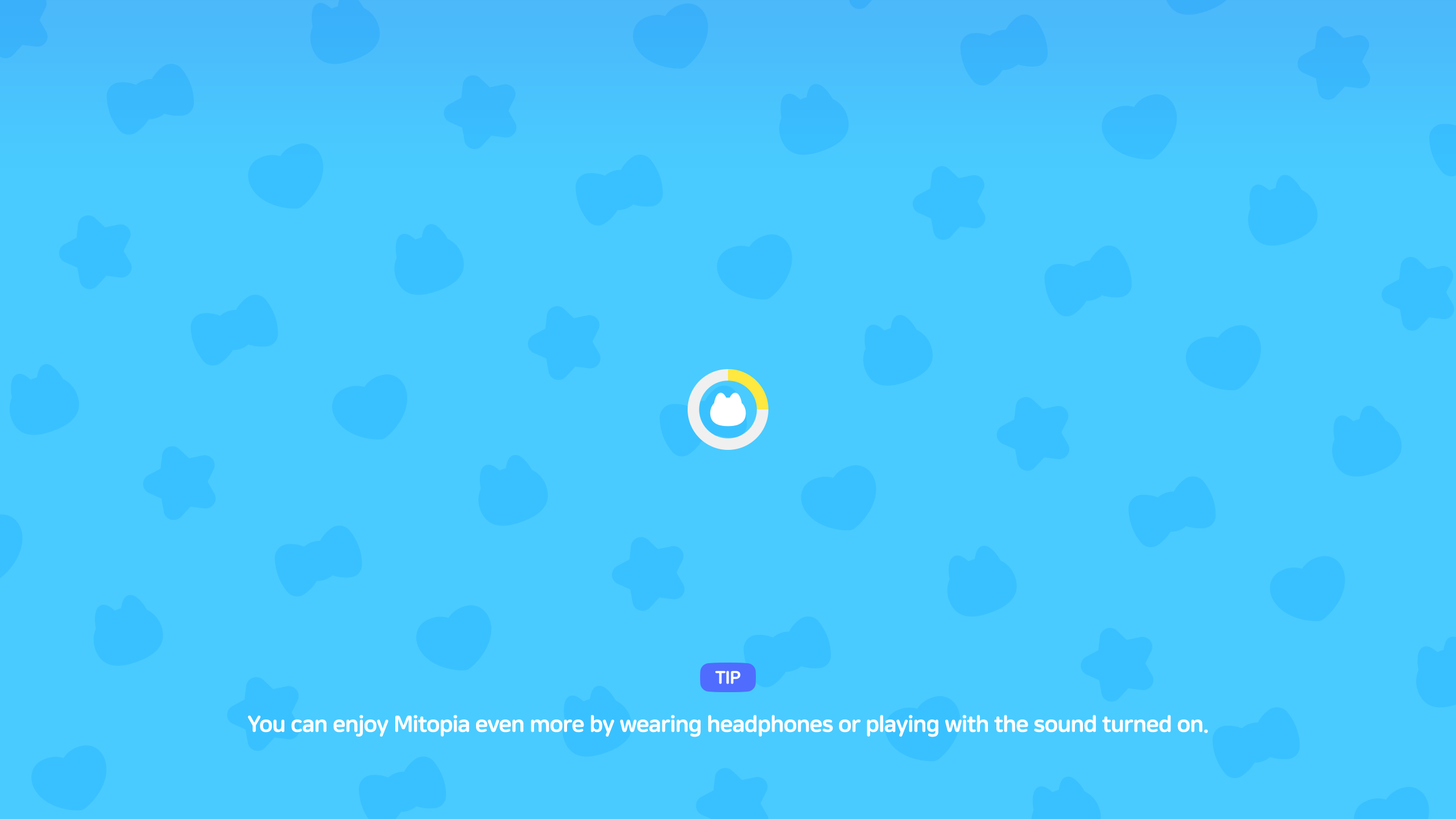
<style>
.page{position:relative;width:1456px;height:819px;background:#49cbff}
.page>*{position:absolute;margin:0}
.t1{font:17.8px "NanumSquareRoundEB";letter-spacing:-0.025em;color:#ffffff;text-transform:uppercase}
.t2{font:22.7px "NanumSquareRoundEB";letter-spacing:-0.025em;color:#ffffff}
</style>
<div class="page">
<p class="t1" style="left:715px;top:671px;width:26px;height:13px">Tip</p>
<p class="t2" style="left:248px;top:715px;width:960px;height:22px">You can enjoy Mitopia even more by wearing headphones or playing with the sound turned on.</p>
</div>
